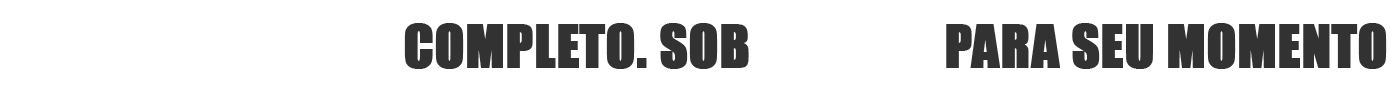
<style>
.page{position:relative;width:1400px;height:87px;background:#ffffff}
.page>*{position:absolute;margin:0}
.t1{font:54.2px "Impact";color:#323232;text-transform:uppercase;font-weight:bold}
.t2{font:54.2px "Impact";color:#ffffff;text-transform:uppercase;font-weight:bold}
</style>
<div class="page">
<p class="t1" style="left:22px;top:15px;width:1365px;height:54px"><span class="t2">Um condomínio </span>completo. sob <span class="t2">medida </span>para seu momento</p>
</div>
